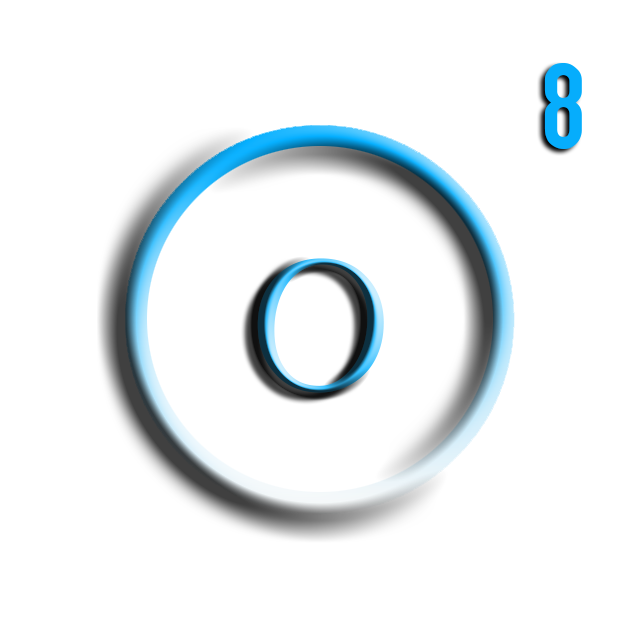
<style>
.page{position:relative;width:640px;height:640px;background:#ffffff}
.page>*{position:absolute;margin:0}
.t1{font:129px "TGL0-1451Engschrift";color:#06adfc}
.t2{font:194px "PortCredit-Regular"}
</style>
<div class="page">
<p class="t1" style="left:544px;top:63px;width:38px;height:86px">8</p>
<p class="t2" style="left:257px;top:258px;width:127px;height:135px">O</p>
</div>
